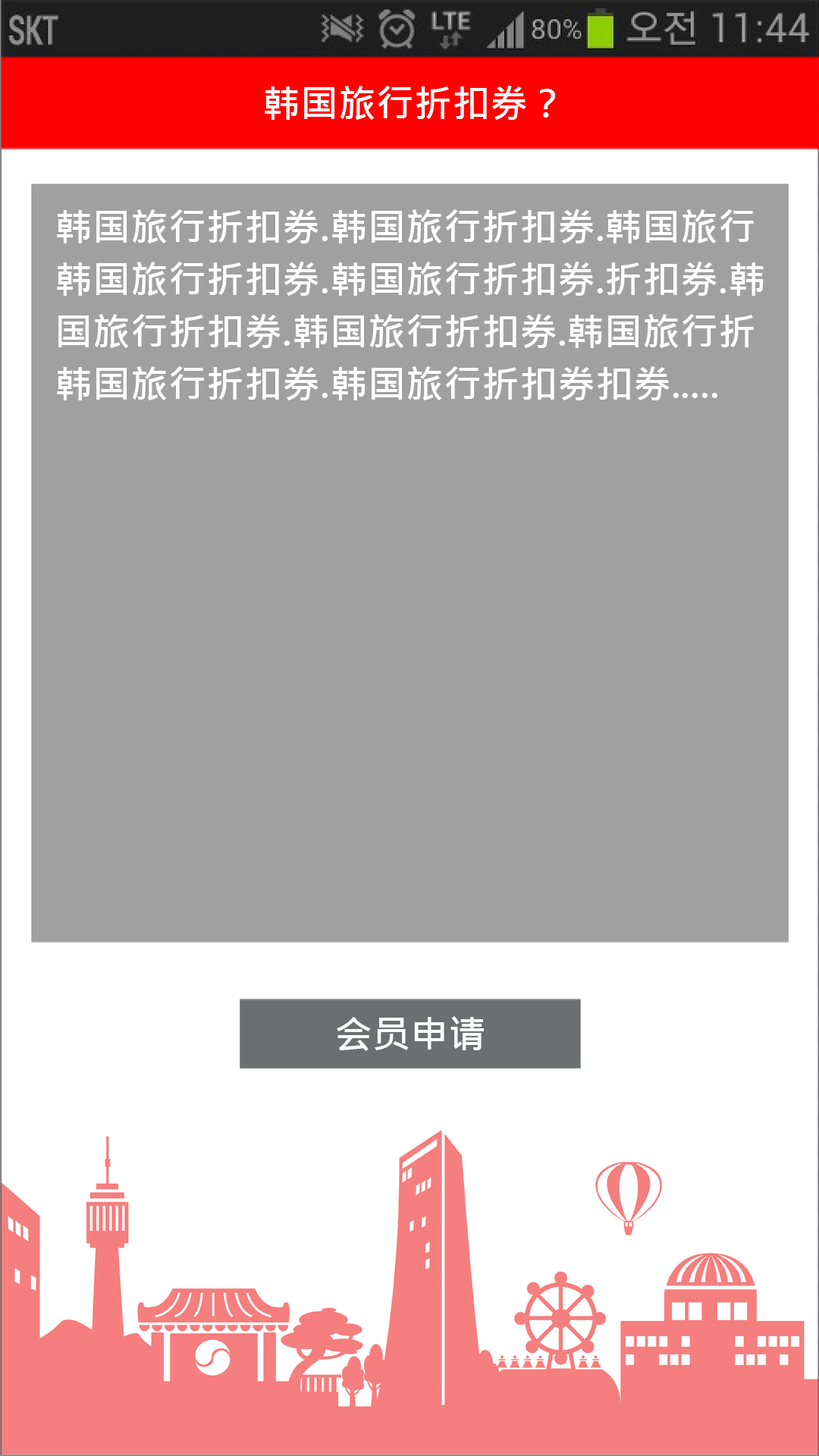
<style>
.page{position:relative;width:819px;height:1456px;background:#a1a0a1}
.page>*{position:absolute;margin:0}
.t1{font:37.9px "MicrosoftJhengHeiBold";color:#ffffff}
.t2{font:37.9px/52.3px "MicrosoftJhengHeiBold";color:#ffffff}
</style>
<div class="page">
<p class="t1" style="left:265px;top:86px;width:290px;height:34px">韩国旅行折扣券？</p>
<p class="t2" style="left:57px;top:209px;width:707px;height:191px">韩国旅行折扣券.韩国旅行折扣券.韩国旅行<br>韩国旅行折扣券.韩国旅行折扣券.折扣券.韩<br>国旅行折扣券.韩国旅行折扣券.韩国旅行折<br>韩国旅行折扣券.韩国旅行折扣券扣券.....</p>
<p class="t1" style="left:337px;top:1016px;width:147px;height:35px">会员申请</p>
</div>
